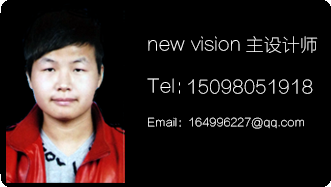
<style>
.page{position:relative;width:331px;height:187px;background:#000000}
.page>*{position:absolute;margin:0}
.t1{font:18px "FZLTCXHJW--GB1-0";color:#ffffff}
.t2{font:11px "FZLTCXHJW--GB1-0";color:#ffffff}
</style>
<div class="page">
<p class="t1" style="left:148px;top:40px;width:37px;height:11px">new</p>
<p class="t1" style="left:191px;top:36px;width:49px;height:15px">vision</p>
<p class="t1" style="left:246px;top:36px;width:72px;height:17px">主设计师</p>
<p class="t1" style="left:147px;top:78px;width:33px;height:16px">Tel：</p>
<p class="t1" style="left:188px;top:79px;width:125px;height:15px">15098051918</p>
<p class="t2" style="left:148px;top:117px;width:156px;height:12px">Email：164996227@qq.com</p>
</div>
